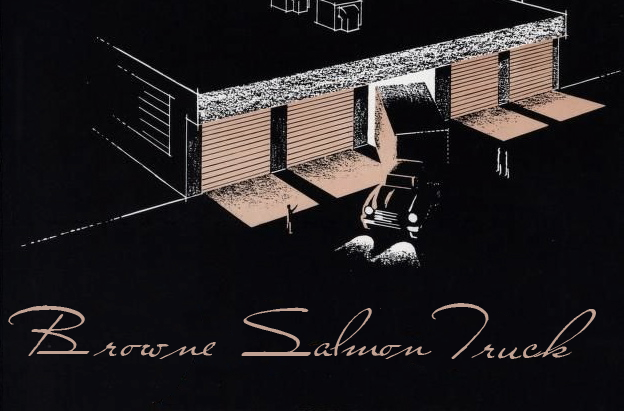
<style>
.page{position:relative;width:624px;height:411px}
.page>*{position:absolute;margin:0}
.t1{font:72px "ClosetoYou";letter-spacing:0.04em;color:#c1a294}
.t2{font:72px "ClosetoYou";color:#c1a294}
</style>
<div class="page">
<p class="t1" style="left:8px;top:305px;width:198px;height:54px">Brown</p>
<p class="t1" style="left:431px;top:303px;width:165px;height:56px">Truck</p>
<p class="t2" style="left:241px;top:307px;width:191px;height:52px">Salmon</p>
<p class="t1" style="left:197px;top:342px;width:19px;height:14px">e</p>
</div>
